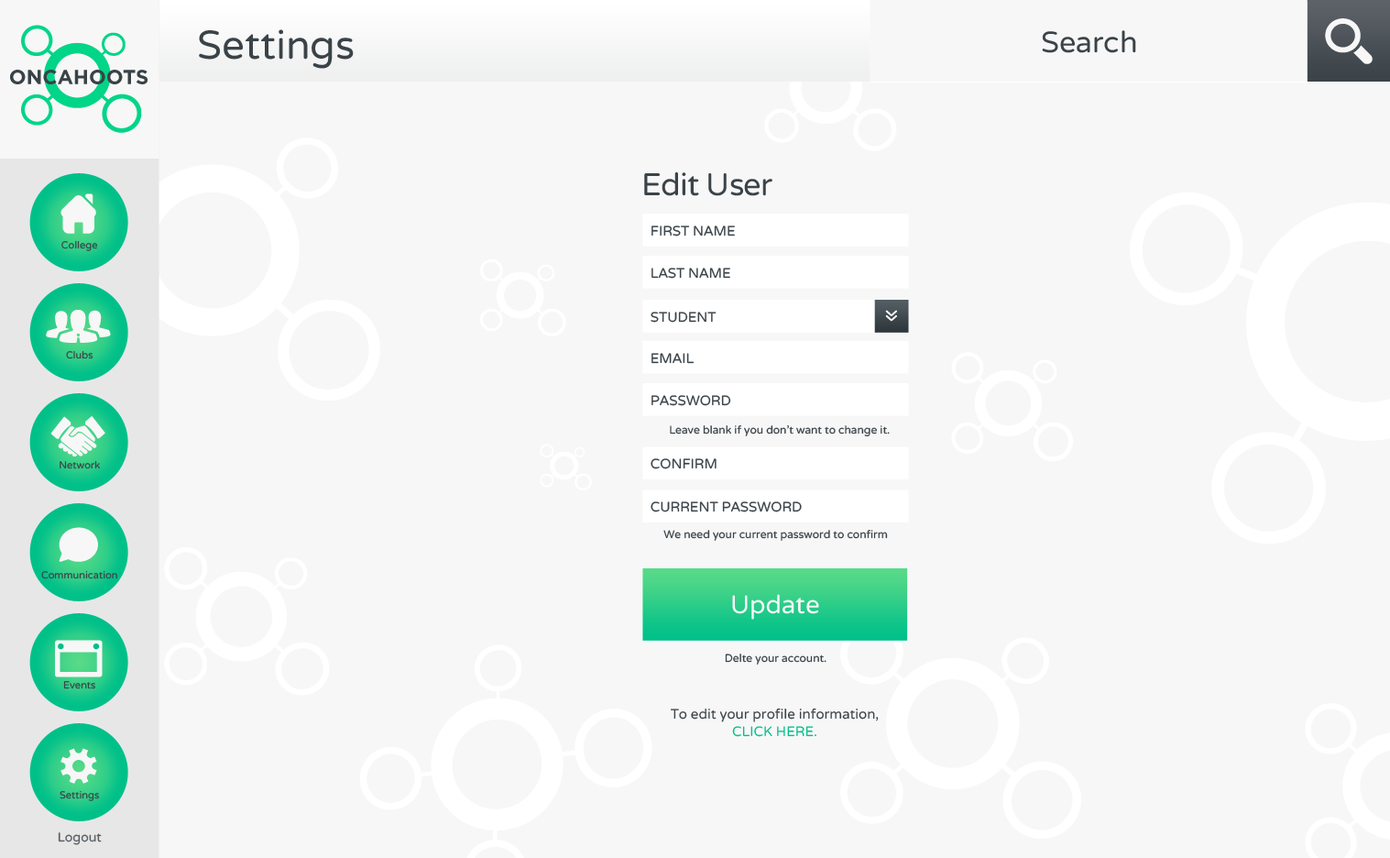
<style>
.page{position:relative;width:1390px;height:858px;background:#f7f7f7}
.page>*{position:absolute;margin:0}
.t1{font:40px "VarelaRound-Regular";color:#3a4348}
.t2{font:29.5px "VarelaRound-Regular";color:#3a4348}
.t3{font:31.4px "VarelaRound-Regular";letter-spacing:-0.02em;color:#3a4348}
.t4{font:13.7px "VarelaRound-Regular";color:#3a4348;text-transform:uppercase}
.t5{font:10.1px "VarelaRound-Regular";color:#3a4348}
.t6{font:11px "VarelaRound-Regular";color:#3a4348}
.t7{font:25.4px "VarelaRound-Regular";color:#f7f7f7}
.t8{font:13.7px/26.6px "VarelaRound-Regular";color:#3a4348}
.t9{font:13.7px/17.4px "VarelaRound-Regular";color:#00c089;text-transform:uppercase}
.t10{font:12.8px "VarelaRound-Regular";color:#5c6066}
</style>
<div class="page">
<p class="t1" style="left:199px;top:29px;width:155px;height:40px">Settings</p>
<p class="t2" style="left:1042px;top:30px;width:94px;height:23px">Search</p>
<p class="t3" style="left:644px;top:171px;width:129px;height:25px">Edit User</p>
<p class="t4" style="left:652px;top:225px;width:83px;height:11px">First Name</p>
<p class="t5" style="left:61px;top:240px;width:37px;height:11px">College</p>
<p class="t4" style="left:652px;top:268px;width:78px;height:11px">Last Name</p>
<p class="t4" style="left:651px;top:312px;width:66px;height:11px">Student</p>
<p class="t5" style="left:66px;top:350px;width:27px;height:9px">Clubs</p>
<p class="t4" style="left:652px;top:353px;width:43px;height:11px">Email</p>
<p class="t4" style="left:652px;top:395px;width:79px;height:11px">Password</p>
<p class="t6" style="left:670px;top:425px;width:220px;height:12px">Leave blank if you don’t want to change it.</p>
<p class="t5" style="left:60px;top:460px;width:40px;height:9px">Network</p>
<p class="t4" style="left:651px;top:458px;width:66px;height:11px">Confirm</p>
<p class="t4" style="left:651px;top:501px;width:151px;height:11px">Current Password</p>
<p class="t6" style="left:663px;top:530px;width:225px;height:11px">We need your current password to confirm changes.</p>
<p class="t5" style="left:41px;top:570px;width:76px;height:9px">Communication</p>
<p class="t7" style="left:732px;top:594px;width:87px;height:25px">Update</p>
<p class="t6" style="left:725px;top:653px;width:102px;height:11px">Delte your account.</p>
<p class="t5" style="left:63px;top:681px;width:32px;height:8px">Events</p>
<p class="t8" style="left:671px;top:707px;width:208px;height:30px;text-align:center">To edit your profile information,<br><span class="t9">Click here.</span></p>
<p class="t5" style="left:60px;top:791px;width:39px;height:10px">Settings</p>
<p class="t10" style="left:58px;top:832px;width:44px;height:13px">Logout</p>
</div>
